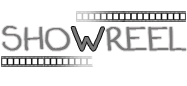
<style>
.page{position:relative;width:187px;height:86px;background:#ffffff}
.page>*{position:absolute;margin:0}
.t1{font:48px "Kaileen";color:#787878;text-transform:uppercase;font-weight:bold}
</style>
<div class="page">
<p class="t1" style="left:2px;top:26px;width:184px;height:25px">Showreel</p>
</div>
